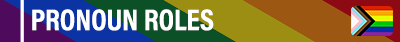
<style>
.page{position:relative;width:400px;height:42px}
.page>*{position:absolute;margin:0}
.t1{font:30px "AcuminProCond-Bold";color:#ffffff;text-transform:uppercase}
</style>
<div class="page">
<p class="t1" style="left:32px;top:9px;width:182px;height:22px">PRONOUN ROLES</p>
</div>
